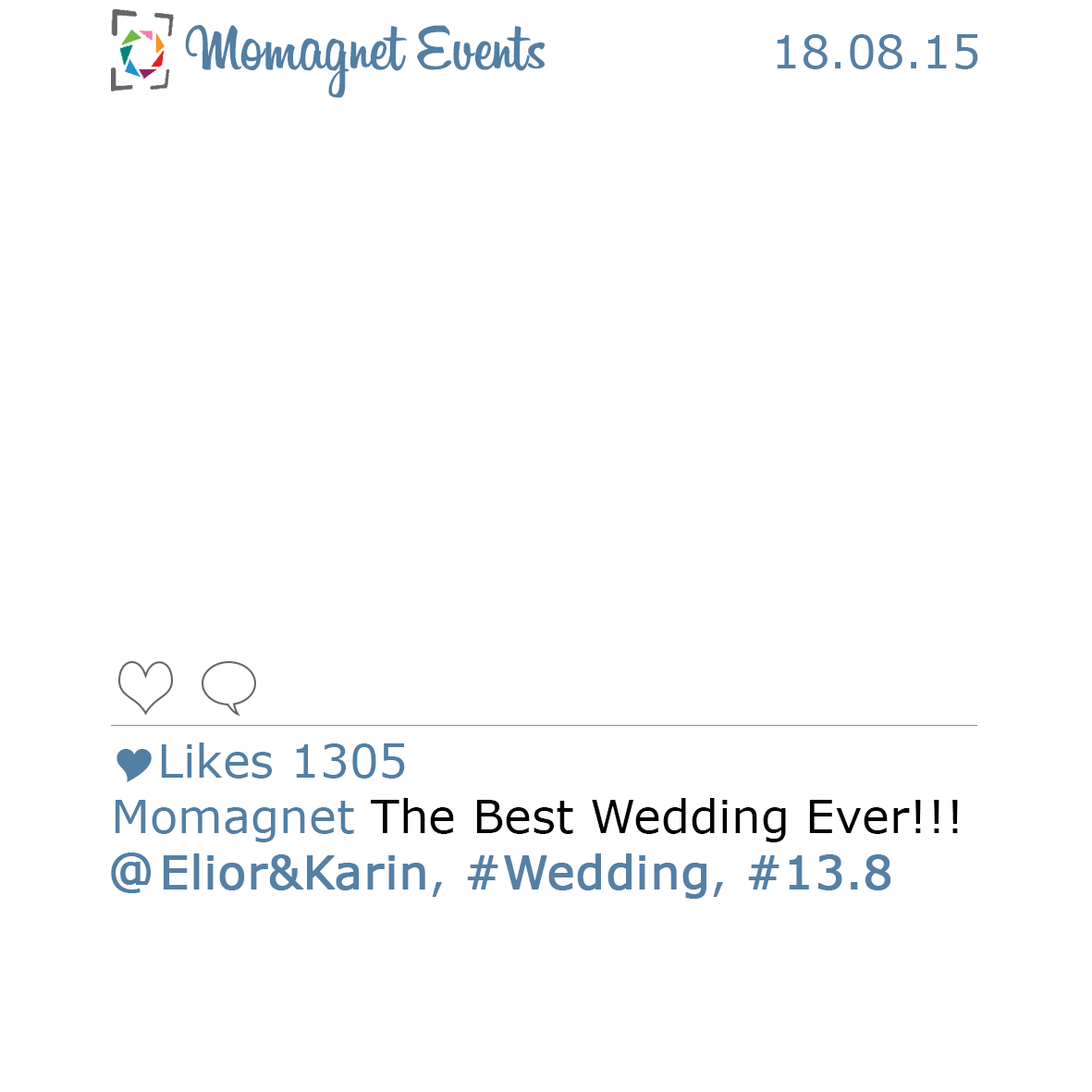
<style>
.page{position:relative;width:1092px;height:1092px;background:#ffffff}
.page>*{position:absolute;margin:0}
.t1{font:69.3px "Billabong";color:#527fa4}
.t2{font:46.2px "Verdana";color:#5580a5}
.t3{font:46.2px "Verdana";color:#000000}
.t4{font:46.2px "Webdings";color:#527fa4}
.t5{font:46.2px "Verdana";color:#527fa4}
.t6{font:46.2px "Verdana";color:#ffffff;font-weight:bold}
.t7{font:46.2px "Verdana";color:#5580a5;font-weight:bold}
.t8{font:46.2px "Verdana";color:#527fa4;font-weight:bold}
</style>
<div class="page">
<p class="t1" style="left:185px;top:25px;width:360px;height:73px">Momagnet Events</p>
<p class="t2" style="left:777px;top:34px;width:201px;height:35px">18.08.15</p>
<p class="t3" style="left:115px;top:742px;width:843px;height:157px;text-align:right"><span class="t4">Y</span><span class="t5">Likes 1305<br></span>!!!<span class="t5">Momagnet </span>The Best Wedding Ever<br><span class="t6">E </span><span class="t7">Elior&amp;Karin</span><span class="t2">,</span><span class="t7"> #Wedding</span><span class="t2">,</span><span class="t7"> #13.8</span></p>
<p class="t8" style="left:111px;top:853px;width:40px;height:40px">@</p>
</div>
